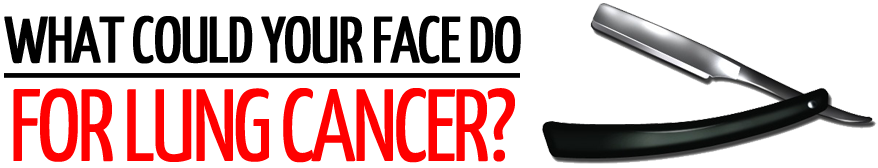
<style>
.page{position:relative;width:878px;height:168px;background:#ffffff}
.page>*{position:absolute;margin:0}
.t1{font:64.9px "YanoneKaffeesatz-Regular";letter-spacing:-0.04em;color:#000000;text-transform:uppercase;font-weight:bold}
.t2{font:102.3px "YanoneKaffeesatz-Regular";letter-spacing:-0.04em;color:#ff0000;text-transform:uppercase}
</style>
<div class="page">
<p class="t1" style="left:4px;top:15px;width:517px;height:49px">WHAT COULD YOUR FACE DO</p>
<p class="t2" style="left:13px;top:88px;width:502px;height:75px">FOR LUNG CANCER?</p>
</div>
